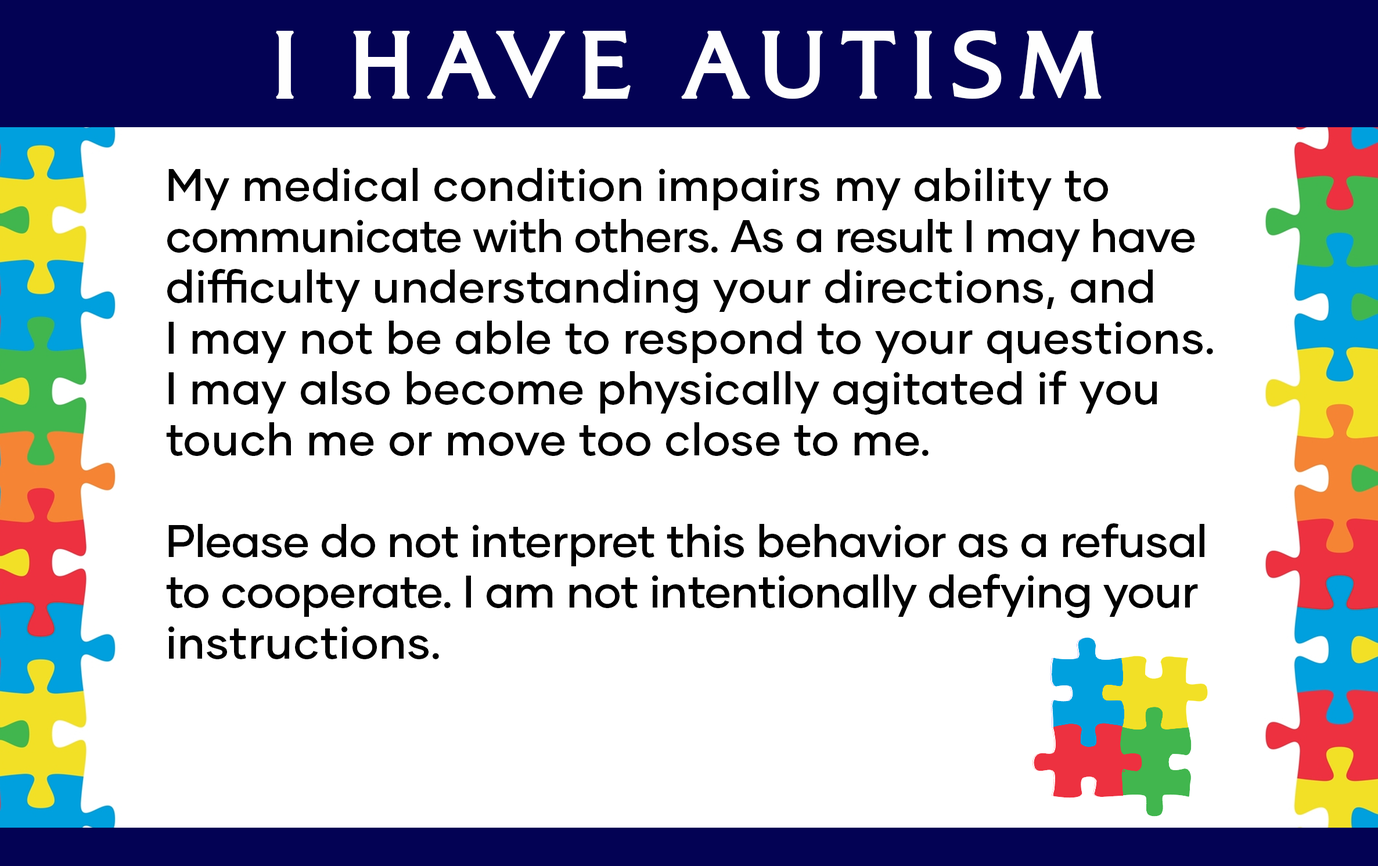
<style>
.page{position:relative;width:1378px;height:866px;background:#ffffff}
.page>*{position:absolute;margin:0}
.t1{font:96.8px "AlexonRR-Medium";letter-spacing:0.15em;color:#fefefe;font-weight:bold}
.t2{font:45.3px/50.8px "GilmerMedium";letter-spacing:0.01em;color:#000000}
.t3{font:45.3px/50.8px "GilmerMedium";letter-spacing:-0.015em;color:#000000}
.t4{font:45.3px/50.8px "GilmerMedium";letter-spacing:-0.01em;color:#000000}
</style>
<div class="page">
<p class="t1" style="left:276px;top:30px;width:825px;height:69px">I HAVE AUTISM</p>
<p class="t2" style="left:166px;top:168px;width:1047px;height:491px">My medical condition impairs my ability to <br><span class="t3">communicate with others. As a result I may have<br></span>difficulty understanding your directions, and <br>I may not be able to respond to your questions. <br>I may also become physically agitated if you <br>touch me or move too close to me.<br><br><span class="t4">Please do not interpret this behavior as a refusal<br>to cooperate. I am not intentionally defying your <br></span>instructions.</p>
</div>
